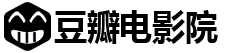
<style>
.page{position:relative;width:250px;height:53px;background:#ffffff}
.page>*{position:absolute;margin:0}
.t1{font:35.8px "MicrosoftYaHei-Bold";color:#010101;scale:0.91 1}
</style>
<div class="page">
<p class="t1" style="left:54px;top:10px;width:164px;height:34px">豆瓣电影院</p>
</div>
